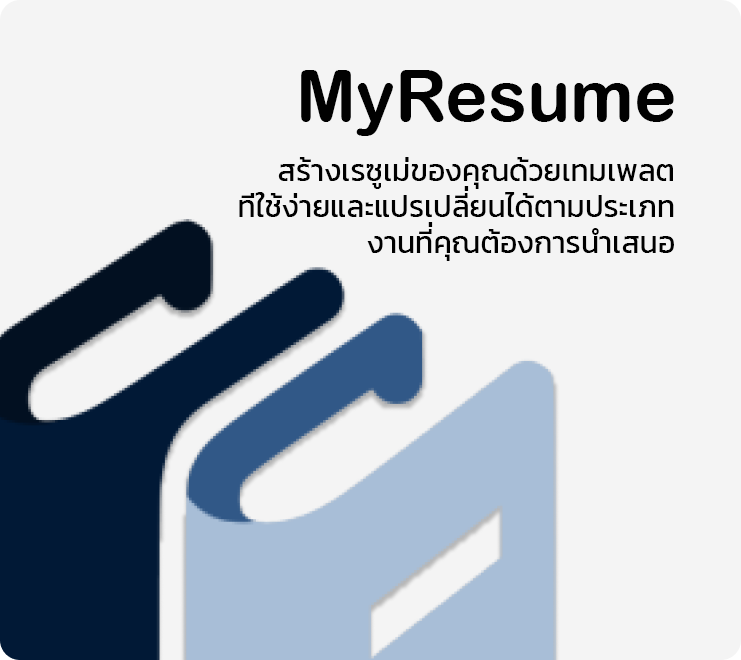
<style>
.page{position:relative;width:741px;height:660px;background:#f4f4f4}
.page>*{position:absolute;margin:0}
.t1{font:72px "ArialRoundedMTBold";color:#010101}
.t2{font:30px "Kanit-Regular";color:#000000}
</style>
<div class="page">
<p class="t1" style="left:301px;top:70px;width:373px;height:66px">MyResume</p>
<p class="t2" style="left:239px;top:157px;width:435px;height:104px;text-align:right">สร้างเรซูเม่ของคุณด้วยเทมเพลต<br>ที่ใช้ง่ายและแปรเปลียนได้ตามประเภท<br>งานทีคุณต้องการนำเสนอ</p>
<p class="t2" style="left:464px;top:186px;width:5px;height:5px">่</p>
<p class="t2" style="left:428px;top:222px;width:5px;height:5px">่</p>
</div>
